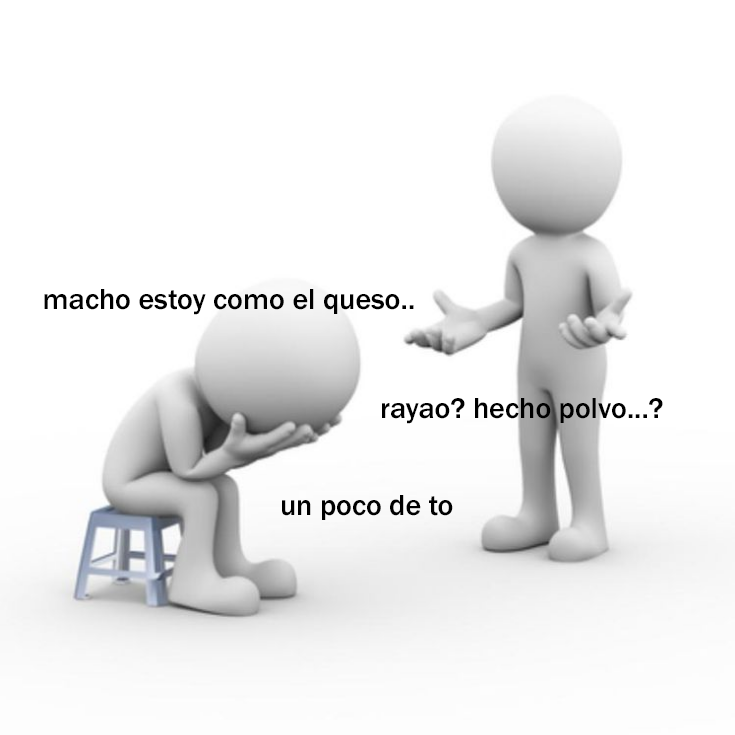
<style>
.page{position:relative;width:735px;height:735px;background:#ffffff}
.page>*{position:absolute;margin:0}
.t1{font:30px "FranklinGothic-Medium";color:#000000}
</style>
<div class="page">
<p class="t1" style="left:44px;top:289px;width:370px;height:26px">macho estoy como el queso..</p>
<p class="t1" style="left:382px;top:398px;width:281px;height:26px">rayao? hecho polvo...?</p>
<p class="t1" style="left:282px;top:495px;width:171px;height:25px">un poco de to</p>
</div>
